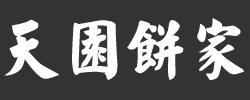
<style>
.page{position:relative;width:250px;height:100px;background:#333333}
.page>*{position:absolute;margin:0}
.t1{font:67px "¾­µä·±Ã«¿¬ Regular";letter-spacing:-0.05em;color:#ffffff}
</style>
<div class="page">
<p class="t1" style="left:4px;top:18px;width:241px;height:62px">天园饼家</p>
</div>
